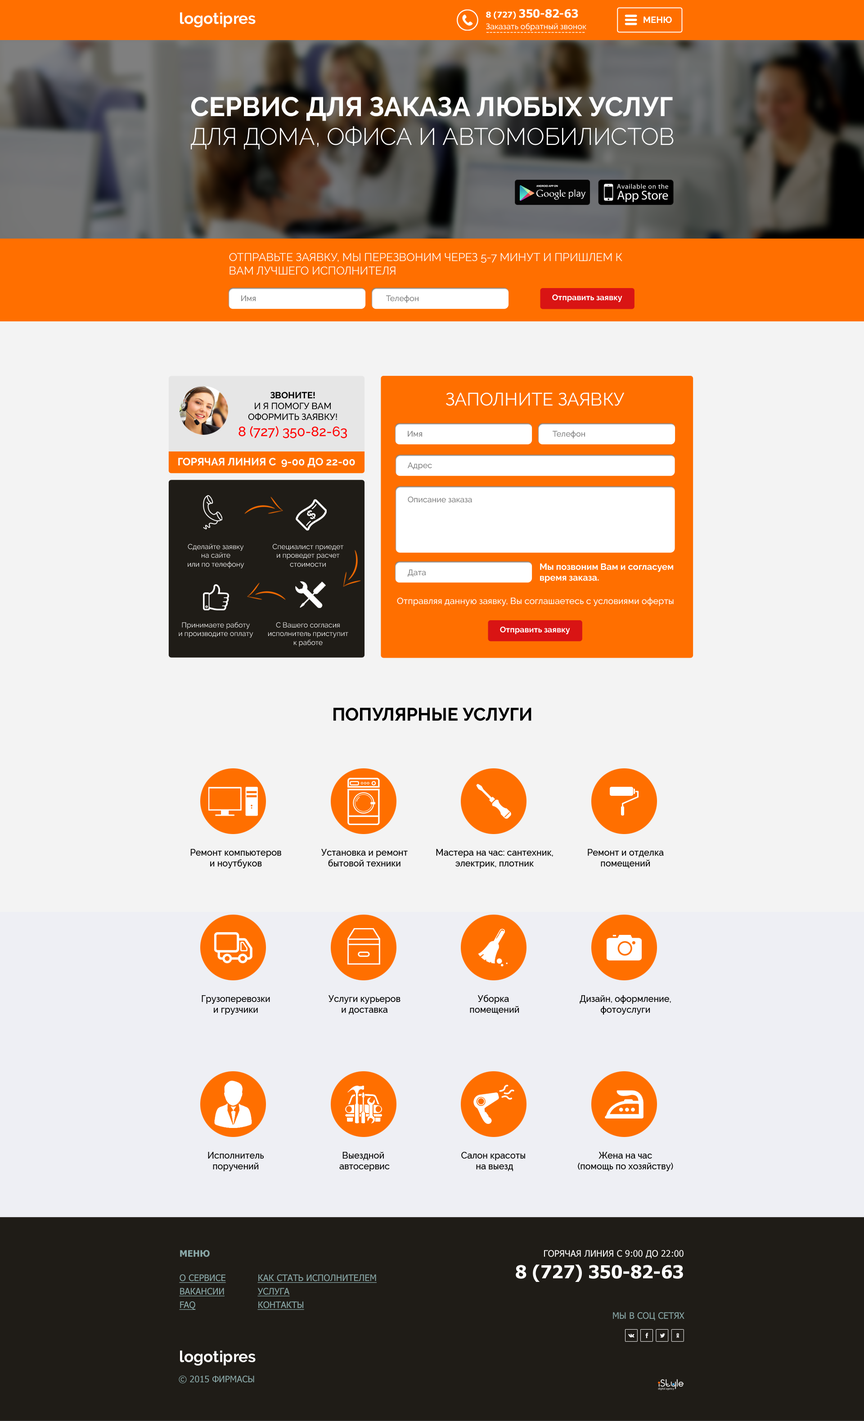
<style>
.page{position:relative;width:864px;height:1421px;background:#f3f3f3}
.page>*{position:absolute;margin:0}
.t1{font:15.8px "Raleway-Bold";color:#fefefe}
.t2{font:11.2px "Tahoma-Bold";color:#ffffff}
.t3{font:8.1px "Tahoma-Bold";color:#ffffff}
.t4{font:9px "Raleway-Bold";color:#ffffff;text-transform:uppercase}
.t5{font:8.1px "Raleway-Medium";color:#ffffff}
.t6{font:8.1px "Raleway-Medium"}
.t7{font:23.9px "Raleway-Light";color:#ffffff;text-transform:uppercase}
.t8{font:27px "Raleway-Bold";color:#ffffff;text-transform:uppercase}
.t9{font:11.2px "Raleway-Regular";color:#ffffff;text-transform:uppercase}
.t10{font:8.1px "Raleway-Medium";color:#808080}
.t11{font:8.1px "Raleway-Bold";color:#ffffff}
.t12{font:9px "Raleway-Medium";color:#000000;text-transform:uppercase}
.t13{font:9px "Raleway-Bold";color:#000000;text-transform:uppercase}
.t14{font:13.5px "Raleway-Medium";color:#ff0000;text-transform:uppercase}
.t15{font:18px "Raleway-Regular";color:#ffffff;text-transform:uppercase}
.t16{font:10.6px "Raleway-Bold";color:#ffffff;text-transform:uppercase}
.t17{font:7.2px "Raleway-Regular";color:#ffffff}
.t18{font:9px "Raleway-Bold";color:#ffffff}
.t19{font:9px "Raleway-Medium";color:#ffffff}
.t20{font:18px "Raleway-Bold";color:#000000;text-transform:uppercase}
.t21{font:9px "Raleway-Medium";color:#000000}
.t22{font:9px "Tahoma-Bold";color:#8aa9a9;text-transform:uppercase}
.t23{font:9px "Tahoma";color:#ffffff;text-transform:uppercase}
.t24{font:18px "Tahoma-Bold";color:#ffffff;text-transform:uppercase}
.t25{font:9px/13.5px "Tahoma";color:#8aa9a9;text-transform:uppercase;text-decoration:underline}
.t26{font:9px "Tahoma";color:#8aa9a9;text-transform:uppercase}
</style>
<div class="page">
<p class="t1" style="left:180px;top:12px;width:76px;height:15px">logotipres</p>
<p class="t2" style="left:486px;top:9px;width:92px;height:10px"><span class="t3">8 (727) </span>350-82-63</p>
<p class="t4" style="left:644px;top:16px;width:28px;height:7px">МЕНЮ</p>
<p class="t5" style="left:486px;top:23px;width:100px;height:8px">Заказать обратный звонок</p>
<p class="t6" style="left:486px;top:32px;width:99px;height:1px">-----------------------------</p>
<p class="t7" style="left:191px;top:97px;width:483px;height:52px"><span class="t8">СЕРВИС ДЛЯ ЗАКАЗА ЛЮБЫХ УСЛУГ <br></span>для дома, офиса и автомобилистов</p>
<p class="t9" style="left:229px;top:253px;width:393px;height:22px">Отправьте заявку, мы перезвоним через 5-7 минут и пришлем к <br>Вам лучшего исполнителя</p>
<p class="t10" style="left:241px;top:295px;width:15px;height:6px">Имя</p>
<p class="t10" style="left:386px;top:295px;width:32px;height:8px">Телефон</p>
<p class="t11" style="left:552px;top:294px;width:70px;height:8px">Отправить заявку</p>
<p class="t12" style="left:238px;top:392px;width:109px;height:46px;text-align:center"><span class="t13">Звоните!<br></span>и я помогу вам<br>оформить заявку!<br><span class="t14">8 (727) 350-82-63</span></p>
<p class="t15" style="left:446px;top:392px;width:179px;height:14px">Заполните заявку</p>
<p class="t10" style="left:408px;top:431px;width:14px;height:5px">Имя</p>
<p class="t10" style="left:553px;top:430px;width:32px;height:8px">Телефон</p>
<p class="t16" style="left:178px;top:458px;width:177px;height:10px">Горячая линия с  9-00 до 22-00</p>
<p class="t10" style="left:408px;top:462px;width:24px;height:8px">Адрес</p>
<p class="t10" style="left:408px;top:496px;width:64px;height:7px">Описание заказа</p>
<p class="t17" style="left:188px;top:544px;width:56px;height:24px;text-align:center">Сделайте заявку<br>на сайте<br>или по телефону</p>
<p class="t17" style="left:273px;top:544px;width:71px;height:23px;text-align:center">Специалист приедет<br>и проведет расчет<br>стоимости</p>
<p class="t10" style="left:408px;top:569px;width:18px;height:8px">Дата</p>
<p class="t18" style="left:540px;top:563px;width:133px;height:20px">Мы позвоним Вам и согласуем <br>время заказа.</p>
<p class="t19" style="left:397px;top:597px;width:277px;height:9px">Отправляя данную заявку, Вы соглашаетесь с условиями оферты</p>
<p class="t17" style="left:179px;top:622px;width:74px;height:16px;text-align:center">Принимаете работу<br>и производите оплату</p>
<p class="t17" style="left:268px;top:622px;width:80px;height:25px;text-align:center">С Вашего согласия <br>исполнитель приступит<br>к работе</p>
<p class="t11" style="left:500px;top:626px;width:70px;height:8px">Отправить заявку</p>
<p class="t20" style="left:333px;top:707px;width:198px;height:14px">ПОПУЛЯРНЫЕ УСЛУГИ</p>
<p class="t21" style="left:190px;top:849px;width:91px;height:19px;text-align:center">Ремонт компьютеров<br>и ноутбуков</p>
<p class="t21" style="left:321px;top:849px;width:87px;height:17px;text-align:center">Установка и ремонт<br>бытовой техники</p>
<p class="t21" style="left:436px;top:849px;width:117px;height:19px;text-align:center">Мастера на час: сантехник,<br>электрик, плотник</p>
<p class="t21" style="left:588px;top:849px;width:76px;height:19px;text-align:center">Ремонт и отделка<br>помещений</p>
<p class="t21" style="left:202px;top:995px;width:68px;height:19px;text-align:center">Грузоперевозки<br>и грузчики</p>
<p class="t21" style="left:328px;top:995px;width:72px;height:19px;text-align:center">Услуги курьеров<br>и доставка</p>
<p class="t21" style="left:470px;top:994px;width:49px;height:20px;text-align:center">Уборка <br>помещений</p>
<p class="t21" style="left:580px;top:995px;width:91px;height:19px;text-align:center">Дизайн, оформление,<br>фотоуслуги</p>
<p class="t21" style="left:208px;top:1152px;width:56px;height:19px;text-align:center">Исполнитель<br>поручений</p>
<p class="t21" style="left:339px;top:1152px;width:51px;height:19px;text-align:center">Выездной <br>автосервис</p>
<p class="t21" style="left:461px;top:1152px;width:64px;height:19px;text-align:center">Салон красоты <br>на выезд</p>
<p class="t21" style="left:578px;top:1152px;width:95px;height:19px;text-align:center">Жена на час<br>(помощь по хозяйству)</p>
<p class="t22" style="left:180px;top:1250px;width:30px;height:7px">МЕНЮ</p>
<p class="t23" style="left:516px;top:1250px;width:168px;height:32px;text-align:right">Горячая линия с 9:00 до 22:00<br><span class="t24">8 (727) 350-82-63</span></p>
<p class="t25" style="left:179px;top:1274px;width:47px;height:36px">О cервисе<br>Вакансии<br>faq</p>
<p class="t25" style="left:257px;top:1274px;width:120px;height:36px">Как стать исполнителем<br>услуга<br>контакты</p>
<p class="t26" style="left:613px;top:1312px;width:71px;height:8px">Мы в соц сетях</p>
<p class="t1" style="left:180px;top:1350px;width:76px;height:15px">logotipres</p>
<p class="t26" style="left:179px;top:1375px;width:75px;height:8px">© 2015 фирмасы</p>
</div>
